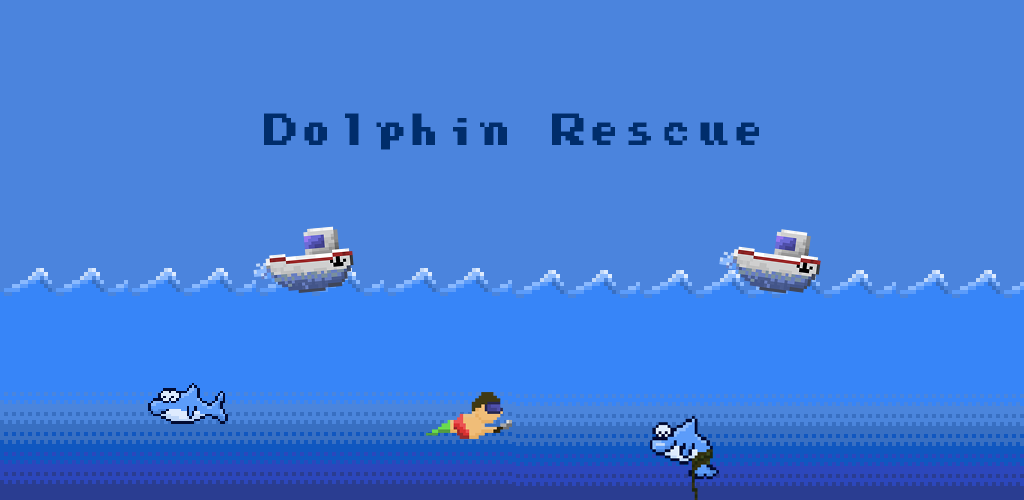
<style>
.page{position:relative;width:1024px;height:500px;background:#4b84dd}
.page>*{position:absolute;margin:0}
.t1{font:36px "PressStartReg";color:#002d6b}
</style>
<div class="page">
<p class="t1" style="left:264px;top:113px;width:495px;height:37px">Dolphin Rescue</p>
</div>
